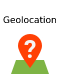
<style>
.page{position:relative;width:60px;height:80px;background:#ffffff}
.page>*{position:absolute;margin:0}
.t1{font:9px "DejaVuSans";color:#000000}
</style>
<div class="page">
<p class="t1" style="left:3px;top:16px;width:53px;height:8px">Geolocation</p>
</div>
